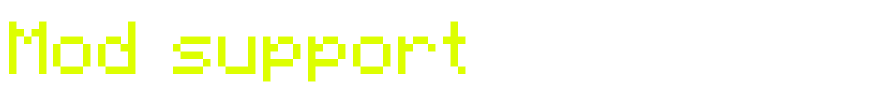
<style>
.page{position:relative;width:880px;height:110px;background:#ffffff}
.page>*{position:absolute;margin:0}
.t1{font:75px "Minecraft-Regular";color:#ddff00}
</style>
<div class="page">
<p class="t1" style="left:9px;top:21px;width:457px;height:61px">Mod support</p>
</div>
